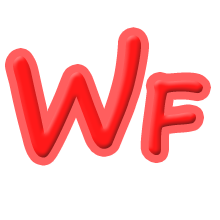
<style>
.page{position:relative;width:220px;height:220px;background:#ffffff}
.page>*{position:absolute;margin:0}
.t1{font:133.3px "SegoeScript-Bold";text-transform:uppercase}
.t2{font:96px "SegoeScript-Bold";text-transform:uppercase}
</style>
<div class="page">
<p class="t1" style="left:13px;top:35px;width:190px;height:123px">W<span class="t2">F</span></p>
</div>
